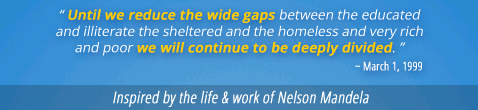
<style>
.page{position:relative;width:478px;height:110px}
.page>*{position:absolute;margin:0}
.t1{font:13.5px "OpenSans";color:#ffffff;font-style:italic}
.t2{font:13.5px "OpenSans-Semibold";color:#ffcb08;font-weight:bold;font-style:italic}
.t3{font:12px "OpenSans-CondensedLight";color:#fefefe;font-weight:bold}
.t4{font:16px "OpenSans-CondensedLight";color:#ffffff;font-weight:bold;font-style:italic}
</style>
<div class="page">
<p class="t1" style="left:56px;top:9px;width:367px;height:47px;text-align:center">“ <span class="t2">Until we reduce the wide gaps </span>between the educated<br>and illiterate the sheltered and the homeless and very rich<br>and poor <span class="t2">we will continue to be deeply divided</span>. ”</p>
<p class="t3" style="left:355px;top:61px;width:67px;height:11px">~ March 1, 1999</p>
<p class="t4" style="left:113px;top:90px;width:256px;height:17px">Inspired by the life &amp; work of Nelson Mandela</p>
</div>
